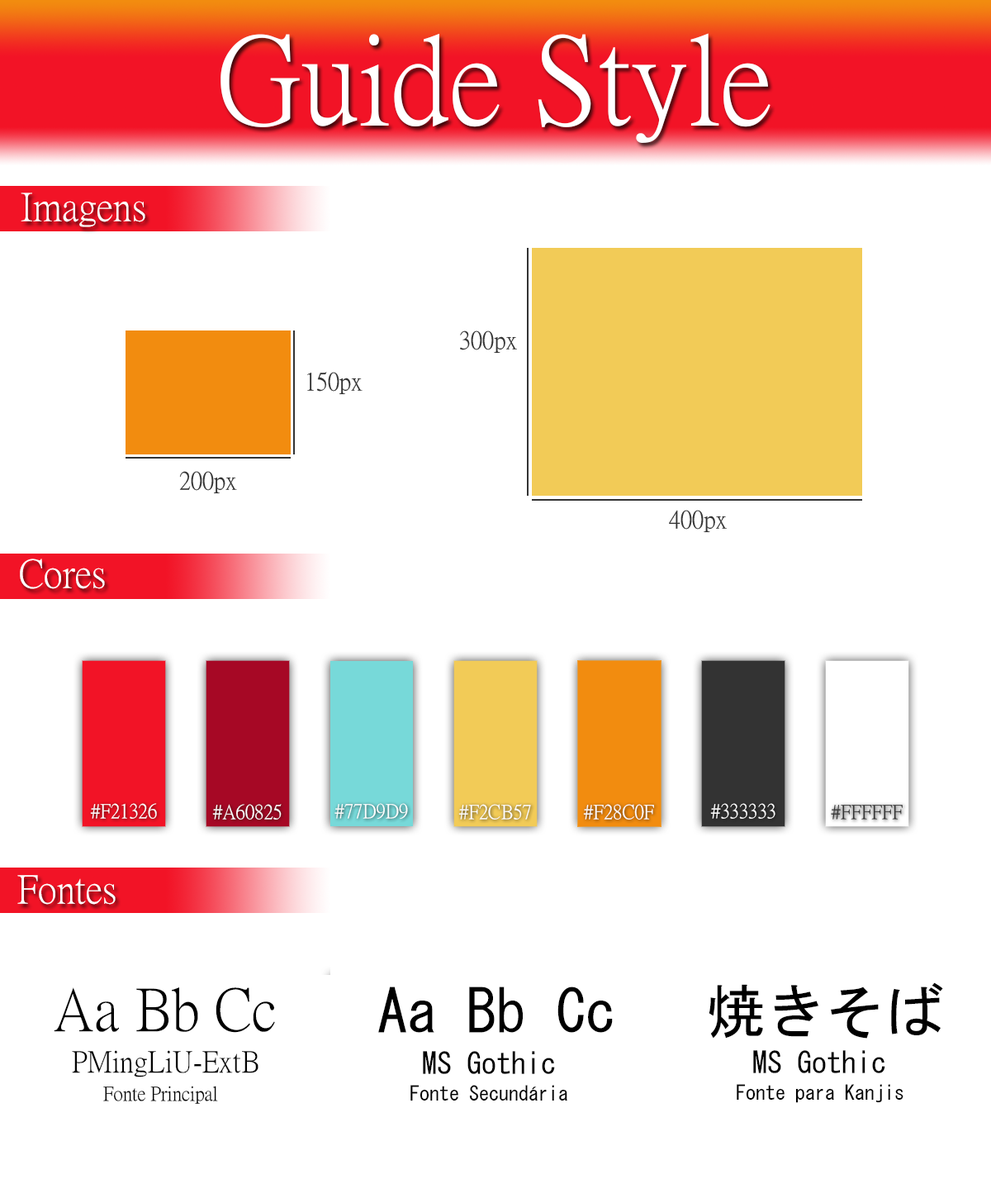
<style>
.page{position:relative;width:991px;height:1203px;background:#ffffff}
.page>*{position:absolute;margin:0}
.t1{font:123.9px "PMingLiU-ExtB";color:#ffffff}
.t2{font:39.7px "PMingLiU-ExtB";color:#ffffff}
.t3{font:19.8px "PMingLiU-ExtB";color:#ffffff}
.t4{font:19.8px "PMingLiU-ExtB";color:#333333}
.t5{font:59.5px "PMingLiU-ExtB";color:#000000}
.t6{font:59.5px "MS-Gothic";color:#000000}
.t7{font:29.7px "PMingLiU-ExtB";color:#000000}
.t8{font:29.7px "MS-Gothic";color:#000000}
.t9{font:19.8px "PMingLiU-ExtB";color:#000000}
.t10{font:19.8px "MS-Gothic";color:#000000}
</style>
<div class="page">
<p class="t1" style="left:221px;top:33px;width:550px;height:110px">Guide Style</p>
<p class="t2" style="left:21px;top:192px;width:124px;height:35px">Imagens</p>
<p class="t2" style="left:20px;top:558px;width:85px;height:31px">Cores</p>
<p class="t3" style="left:90px;top:803px;width:67px;height:16px">#F21326</p>
<p class="t3" style="left:212px;top:804px;width:70px;height:16px">#A60825</p>
<p class="t3" style="left:335px;top:803px;width:73px;height:17px">#77D9D9</p>
<p class="t3" style="left:458px;top:804px;width:73px;height:16px">#F2CB57</p>
<p class="t3" style="left:583px;top:804px;width:71px;height:16px">#F28C0F</p>
<p class="t3" style="left:710px;top:803px;width:66px;height:16px">#333333</p>
<p class="t4" style="left:831px;top:805px;width:72px;height:15px">#FFFFFF</p>
<p class="t2" style="left:17px;top:875px;width:99px;height:30px">Fontes</p>
<p class="t5" style="left:54px;top:987px;width:221px;height:46px">Aa Bb Cc</p>
<p class="t6" style="left:378px;top:986px;width:235px;height:47px">Aa Bb Cc</p>
<p class="t6" style="left:709px;top:982px;width:234px;height:56px">焼きそば</p>
<p class="t7" style="left:72px;top:1050px;width:187px;height:27px">PMingLiU-ExtB</p>
<p class="t8" style="left:423px;top:1051px;width:132px;height:23px">MS Gothic</p>
<p class="t8" style="left:753px;top:1050px;width:133px;height:23px">MS Gothic</p>
<p class="t9" style="left:103px;top:1086px;width:115px;height:18px">Fonte Principal</p>
<p class="t10" style="left:411px;top:1085px;width:157px;height:16px">Fonte Secundária</p>
<p class="t10" style="left:737px;top:1084px;width:167px;height:19px">Fonte para Kanjis</p>
</div>
